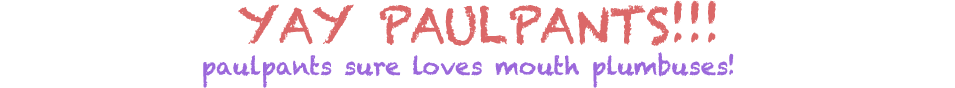
<style>
.page{position:relative;width:955px;height:88px;background:#ffffff}
.page>*{position:absolute;margin:0}
.t1{font:48px "Chalkduster";color:#db6868}
.t2{font:24px "Chalkduster";color:#9b68db}
</style>
<div class="page">
<p class="t1" style="left:238px;top:0px;width:478px;height:46px">YAY PAULPANTS!!!</p>
<p class="t2" style="left:203px;top:52px;width:531px;height:36px">paulpants sure loves mouth plumbuses!</p>
</div>
